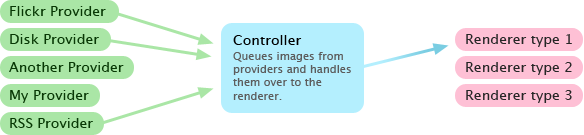
<style>
.page{position:relative;width:584px;height:135px;background:#ffffff}
.page>*{position:absolute;margin:0}
.t1{font:14px "LucidaGrande";color:#083805}
.t2{font:14px "LucidaGrande";color:#000000}
.t3{font:14px "LucidaGrande";color:#262626}
.t4{font:11px "LucidaGrande";color:#5b5b5b}
</style>
<div class="page">
<p class="t1" style="left:10px;top:6px;width:96px;height:10px">Flickr Provider</p>
<p class="t1" style="left:10px;top:34px;width:89px;height:10px">Disk Provider</p>
<p class="t2" style="left:233px;top:35px;width:69px;height:10px">Controller</p>
<p class="t3" style="left:466px;top:34px;width:106px;height:13px">Renderer type 1</p>
<p class="t4" style="left:233px;top:52px;width:118px;height:48px">Queues images from<br>providers and handles<br>them over to the<br>renderer.</p>
<p class="t1" style="left:9px;top:62px;width:115px;height:10px">Another Provider</p>
<p class="t3" style="left:466px;top:62px;width:106px;height:13px">Renderer type 2</p>
<p class="t1" style="left:10px;top:90px;width:79px;height:13px">My Provider</p>
<p class="t3" style="left:466px;top:90px;width:106px;height:13px">Renderer type 3</p>
<p class="t1" style="left:10px;top:118px;width:83px;height:10px">RSS Provider</p>
</div>
